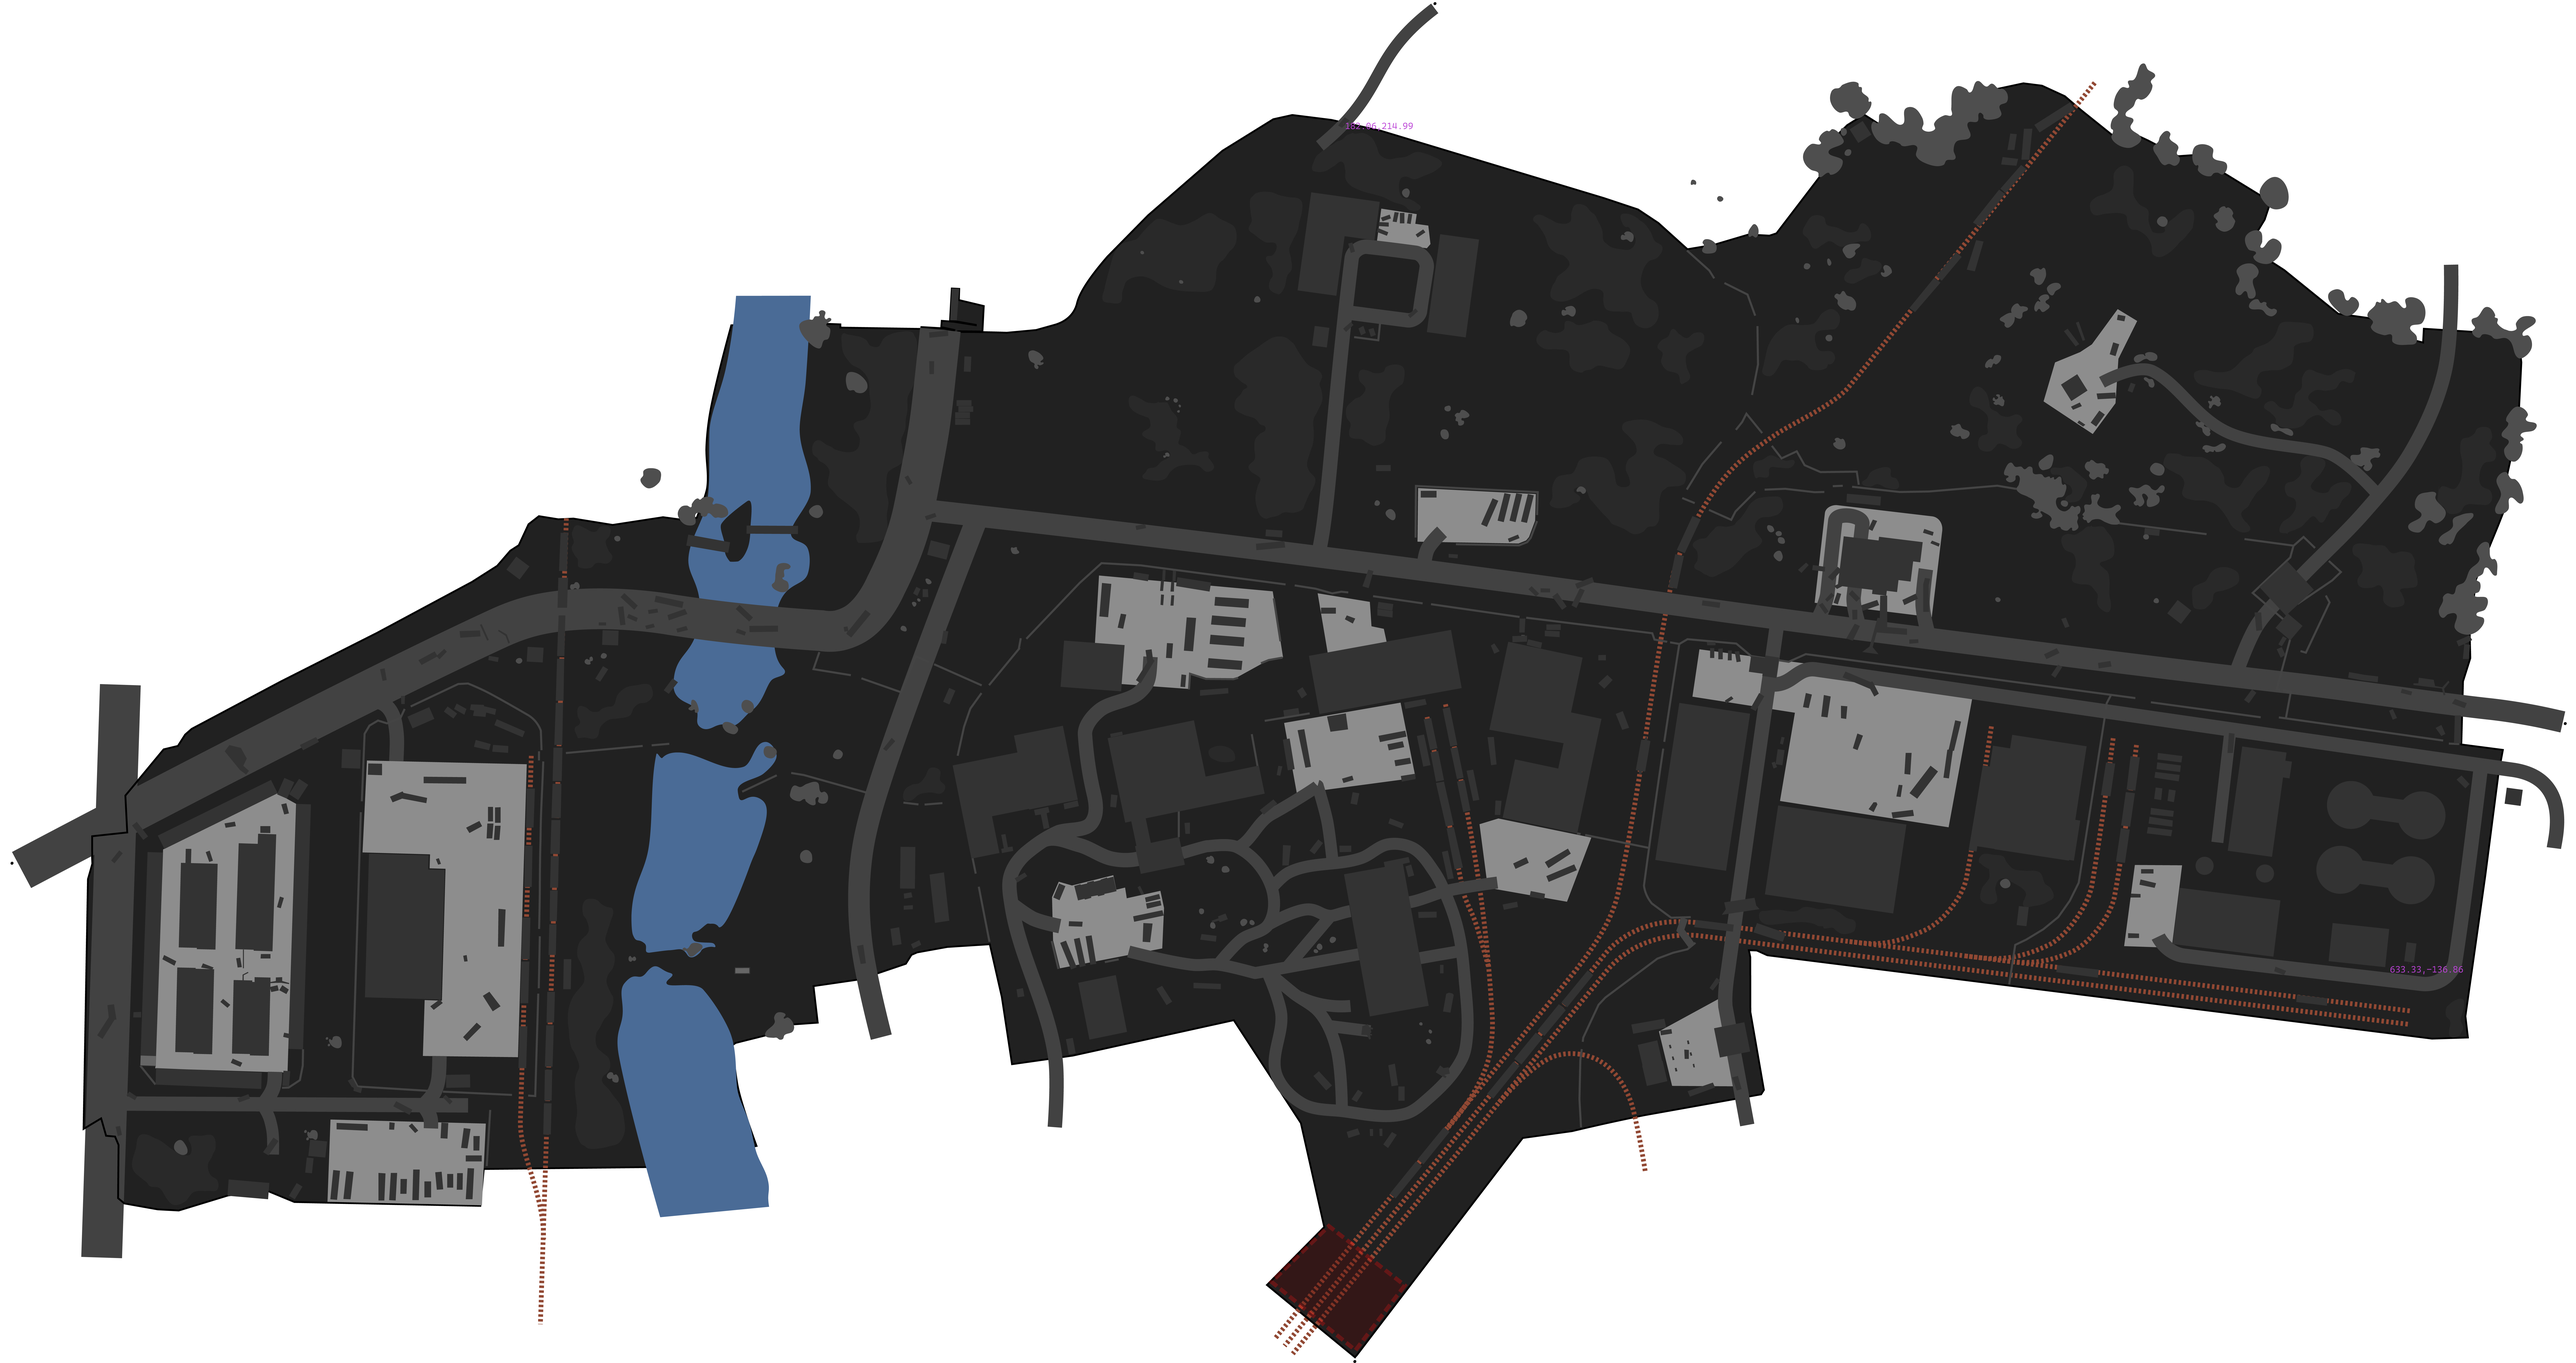
<style>
.page{position:relative;width:2576px;height:1363px;background:#ffffff}
.page>*{position:absolute;margin:0}
.t1{font:8.9px "CascadiaMonoRoman-SemiLight";color:#bb42d6}
</style>
<div class="page">
<p class="t1" style="left:1346px;top:123px;width:67px;height:8px">182.06,214.99</p>
<p class="t1" style="left:2390px;top:966px;width:73px;height:8px">633.33,-136.86</p>
</div>
